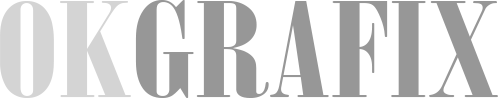
<style>
.page{position:relative;width:498px;height:98px;background:#ffffff}
.page>*{position:absolute;margin:0}
.t1{font:131px "Onyx";color:#979797;scale:1.51 1}
.t2{font:131px "Onyx";color:#d4d4d4;scale:1.51 1}
</style>
<div class="page">
<p class="t1" style="left:0px;top:0px;width:498px;height:98px"><span class="t2">OK</span>GRAFIX</p>
</div>
